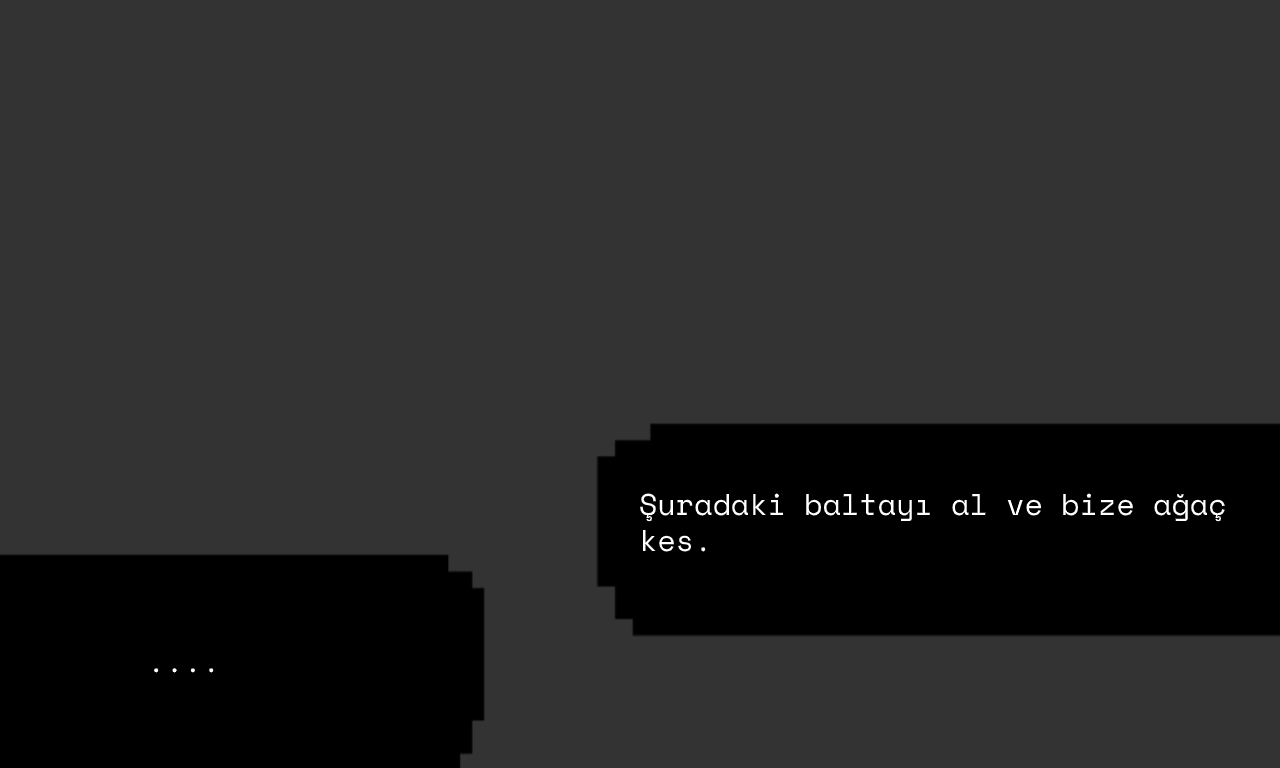
<style>
.page{position:relative;width:1280px;height:768px;background:#333333}
.page>*{position:absolute;margin:0}
.t1{font:30px "SpaceMono-Regular";color:#ffffff}
</style>
<div class="page">
<p class="t1" style="left:640px;top:493px;width:585px;height:59px">Şuradaki baltayı al ve bize ağaç kes.</p>
<p class="t1" style="left:154px;top:668px;width:60px;height:5px">....</p>
</div>
